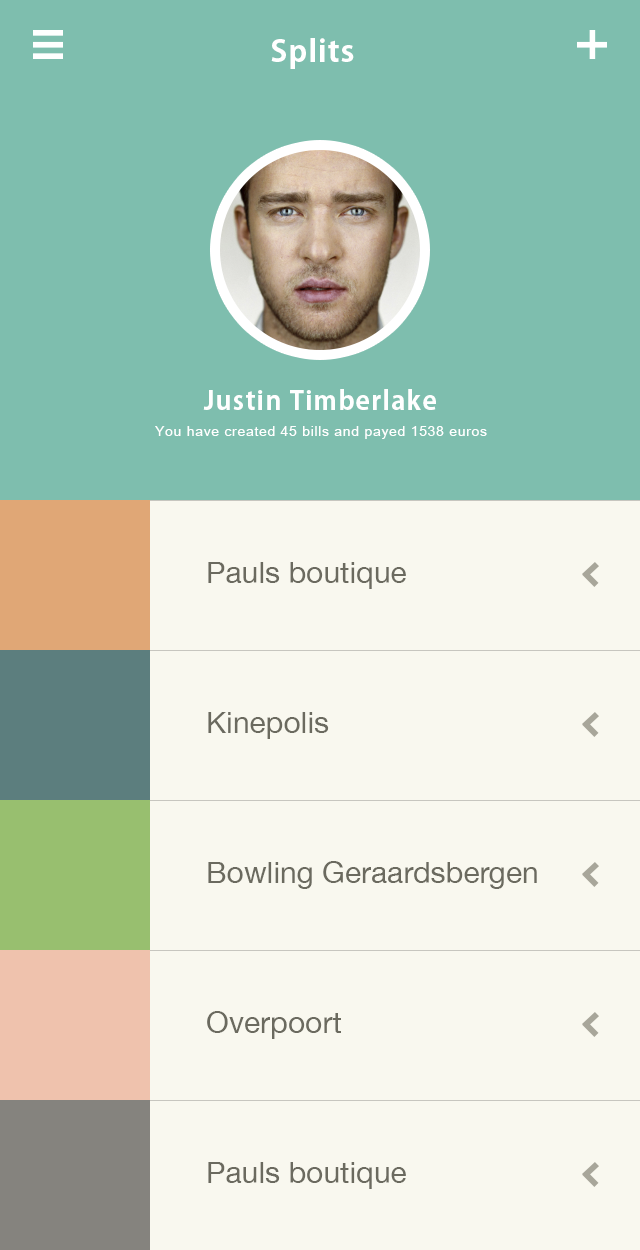
<style>
.page{position:relative;width:640px;height:1250px;background:#f9f8ef}
.page>*{position:absolute;margin:0}
.t1{font:30px "AdobeGothicStd-Bold";letter-spacing:0.05em;color:#ffffff}
.t2{font:26px "AdobeGothicStd-Bold";letter-spacing:0.05em;color:#ffffff}
.t3{font:14px "ArialUnicodeMS";letter-spacing:0.05em;color:#ffffff}
.t4{font:30px "HelveticaNeue";color:#6b6a5f}
</style>
<div class="page">
<p class="t1" style="left:271px;top:38px;width:83px;height:31px">Splits</p>
<p class="t2" style="left:203px;top:389px;width:233px;height:21px">Justin Timberlake</p>
<p class="t3" style="left:155px;top:426px;width:332px;height:13px">You have created 45 bills and payed 1538 euros</p>
<p class="t4" style="left:208px;top:562px;width:198px;height:27px">Pauls boutique</p>
<p class="t4" style="left:208px;top:712px;width:121px;height:27px">Kinepolis</p>
<p class="t4" style="left:208px;top:861px;width:329px;height:28px">Bowling Geraardsbergen</p>
<p class="t4" style="left:207px;top:1011px;width:134px;height:28px">Overpoort</p>
<p class="t4" style="left:208px;top:1162px;width:198px;height:27px">Pauls boutique</p>
</div>
